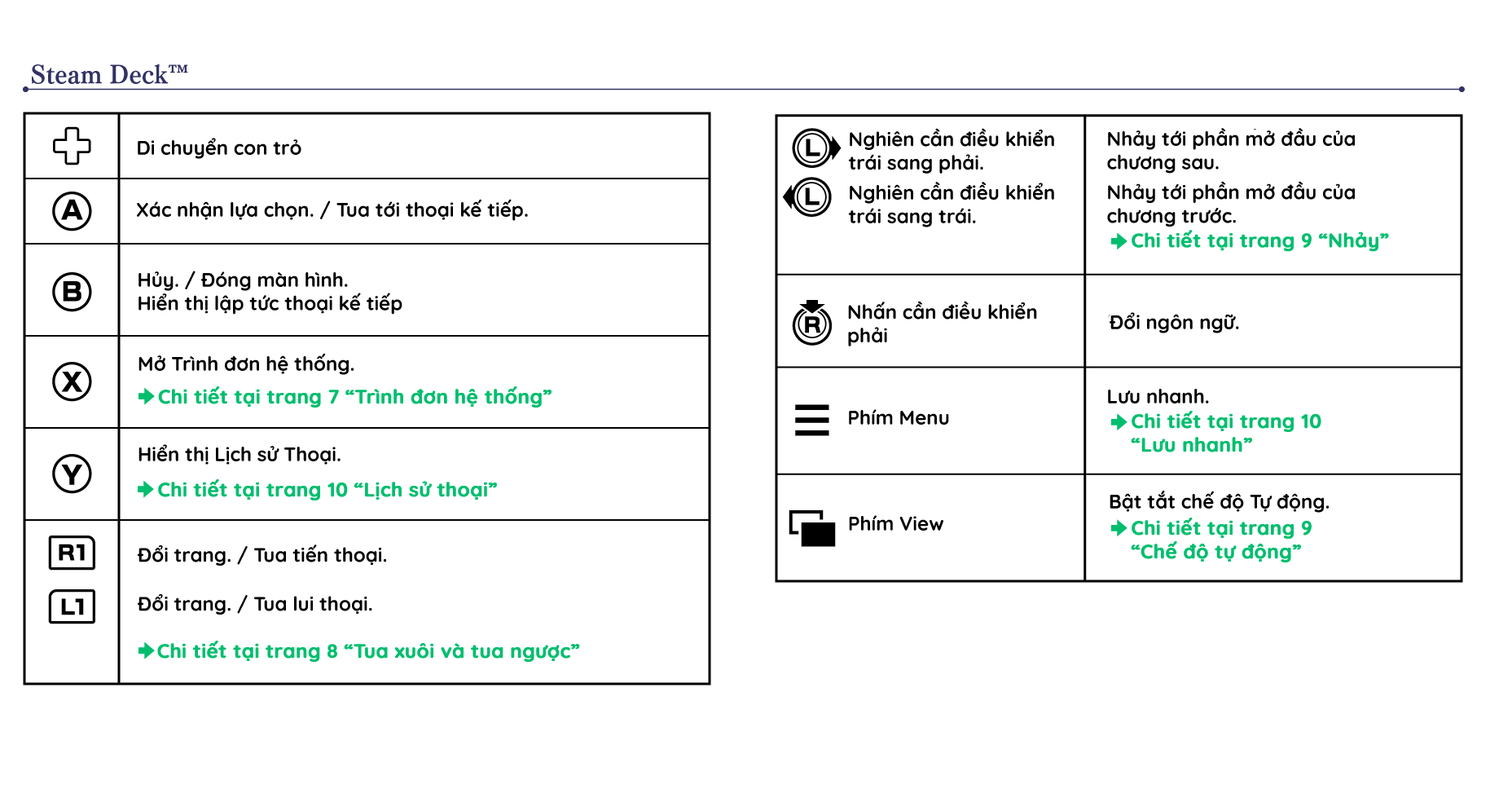
<style>
.page{position:relative;width:1512px;height:789px;background:#ffffff}
.page>*{position:absolute;margin:0}
.t1{font:19.6px "Quicksand-Bold";color:#000000}
.t2{font:19.6px "Quicksand-Bold";color:#00be6e;font-weight:bold}
.t3{font:19.6px/17.9px "Quicksand-Bold";color:#000000}
</style>
<div class="page">
<p class="t1" style="left:138px;top:138px;width:163px;height:21px">Di chuyển con trỏ</p>
<p class="t1" style="left:848px;top:128px;width:206px;height:99px">Nghiên cần điều khiển trái sang phải.<br>Nghiên cần điều khiển trái sang trái.</p>
<p class="t1" style="left:1107px;top:128px;width:248px;height:98px">Nhảy tới phần mở đầu của <br>chương sau.<br>Nhảy tới phần mở đầu của <br>chương trước.</p>
<p class="t1" style="left:137px;top:199px;width:391px;height:22px">Xác nhận lựa chọn. / Tua tới thoại kế tiếp.</p>
<p class="t2" style="left:1132px;top:230px;width:257px;height:22px">Chi tiết tại trang 9 “Nhảy”</p>
<p class="t1" style="left:138px;top:270px;width:264px;height:44px">Hủy. / Đóng màn hình.<br>Hiển thị lập tức thoại kế tiếp</p>
<p class="t1" style="left:848px;top:301px;width:189px;height:45px">Nhấn cần điều khiển phải</p>
<p class="t1" style="left:1110px;top:312px;width:129px;height:21px">Đổi ngôn ngữ.</p>
<p class="t1" style="left:138px;top:353px;width:216px;height:22px">Mở Trình đơn hệ thống.</p>
<p class="t2" style="left:158px;top:386px;width:394px;height:21px">Chi tiết tại trang 7 “Trình đơn hệ thống”</p>
<p class="t1" style="left:1108px;top:389px;width:101px;height:14px">Lưu nhanh.</p>
<p class="t1" style="left:849px;top:409px;width:100px;height:15px">Phím Menu</p>
<p class="t2" style="left:1131px;top:411px;width:190px;height:41px">Chi tiết tại trang 10 <br>“Lưu nhanh”</p>
<p class="t1" style="left:138px;top:444px;width:203px;height:20px">Hiển thị Lịch sử Thoại.</p>
<p class="t2" style="left:158px;top:479px;width:339px;height:21px">Chi tiết tại trang 10 “Lịch sử thoại”</p>
<p class="t1" style="left:1110px;top:490px;width:219px;height:22px">Bật tắt chế độ Tự động.</p>
<p class="t1" style="left:849px;top:515px;width:94px;height:15px">Phím View</p>
<p class="t2" style="left:1131px;top:517px;width:181px;height:45px">Chi tiết tại trang 9<br>“Chế độ tự động”</p>
<p class="t3" style="left:138px;top:544px;width:248px;height:70px">Đổi trang. / Tua tiến thoại. <br><br>Đổi trang. / Tua lui thoại.</p>
<p class="t2" style="left:157px;top:640px;width:423px;height:22px">Chi tiết tại trang 8 “Tua xuôi và tua ngược”</p>
</div>
